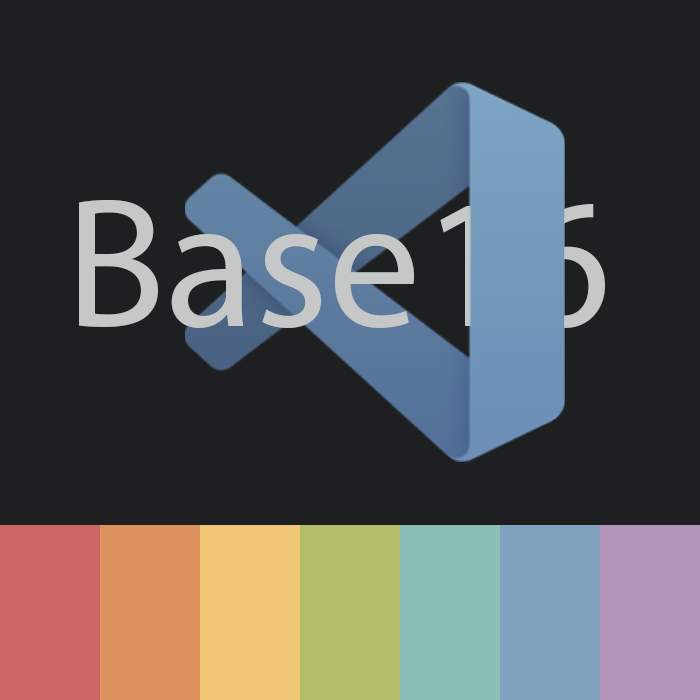
<style>
.page{position:relative;width:700px;height:700px;background:#1d1f21}
.page>*{position:absolute;margin:0}
.t1{font:185.3px "MyriadPro-Regular";color:#c5c8c6}
</style>
<div class="page">
<p class="t1" style="left:79px;top:199px;width:526px;height:129px">Base16</p>
</div>
